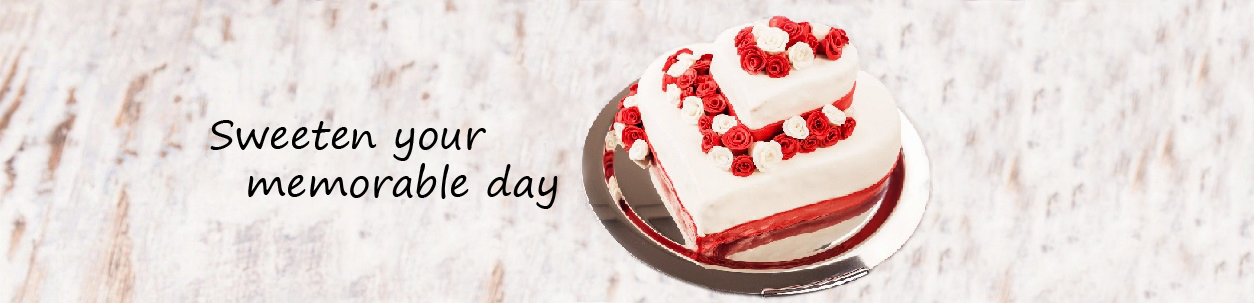
<style>
.page{position:relative;width:1254px;height:303px}
.page>*{position:absolute;margin:0}
.t1{font:40px "SegoePrint";color:#000000}
</style>
<div class="page">
<p class="t1" style="left:210px;top:120px;width:348px;height:89px">Sweeten your <br> memorable day</p>
</div>
